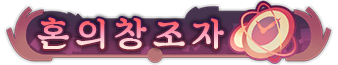
<style>
.page{position:relative;width:338px;height:65px;background:#ffffff}
.page>*{position:absolute;margin:0}
.t1{font:35px "SDKukdetopokki-aLt";letter-spacing:0.18em}
</style>
<div class="page">
<p class="t1" style="left:37px;top:17px;width:187px;height:33px">혼의창조자</p>
</div>
